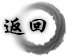
<style>
.page{position:relative;width:67px;height:56px;background:#ffffff}
.page>*{position:absolute;margin:0}
.t1{font:24px "STXingkai";color:#000000}
</style>
<div class="page">
<p class="t1" style="left:4px;top:17px;width:43px;height:18px">返回</p>
</div>
